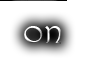
<style>
.page{position:relative;width:92px;height:67px;background:#ffffff}
.page>*{position:absolute;margin:0}
.t1{font:36px "Harrington"}
</style>
<div class="page">
<p class="t1" style="left:24px;top:26px;width:38px;height:18px">on</p>
</div>
